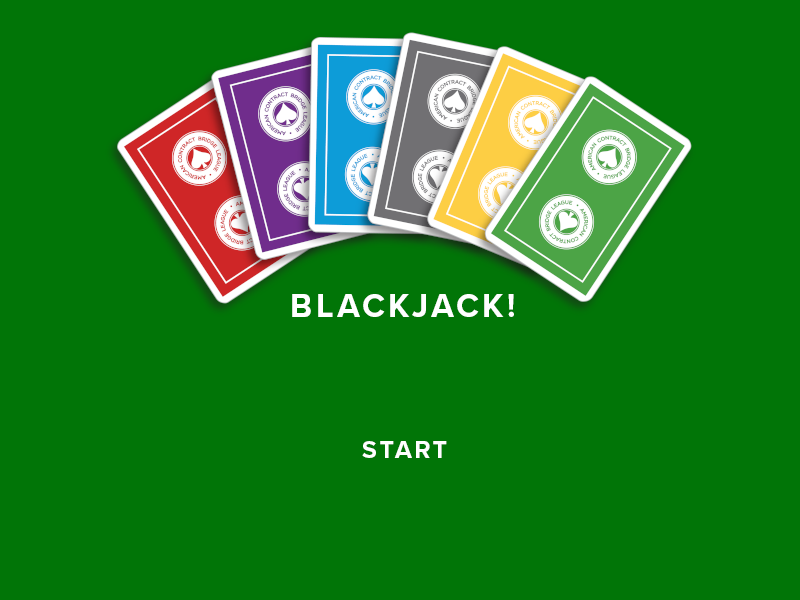
<style>
.page{position:relative;width:800px;height:600px;background:#017507}
.page>*{position:absolute;margin:0}
.t1{font:33.3px "ProximaNova-Bold";letter-spacing:0.1em;color:#ffffff;text-transform:uppercase}
.t2{font:25px "ProximaNova-Bold";letter-spacing:0.1em;color:#ffffff;text-transform:uppercase}
</style>
<div class="page">
<p class="t1" style="left:292px;top:294px;width:222px;height:23px">Blackjack!</p>
<p class="t2" style="left:362px;top:441px;width:85px;height:17px">Start</p>
</div>
